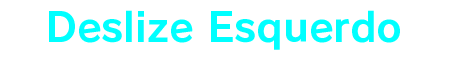
<style>
.page{position:relative;width:450px;height:60px;background:#ffffff}
.page>*{position:absolute;margin:0}
.t1{font:40px "RodinPro-B";color:#00ffff}
</style>
<div class="page">
<p class="t1" style="left:49px;top:10px;width:351px;height:40px">Deslize Esquerdo</p>
</div>
